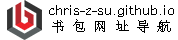
<style>
.page{position:relative;width:178px;height:40px;background:#ffffff}
.page>*{position:absolute;margin:0}
.t1{font:14px "LXGWWenKai-Light";color:#000000}
.t2{font:14px "LXGWWenKaiMono-Regular";letter-spacing:0.52em;color:#000000}
</style>
<div class="page">
<p class="t1" style="left:49px;top:5px;width:125px;height:12px">chris-z-su.github.io</p>
<p class="t2" style="left:52px;top:19px;width:119px;height:14px">书包网址导航</p>
</div>
